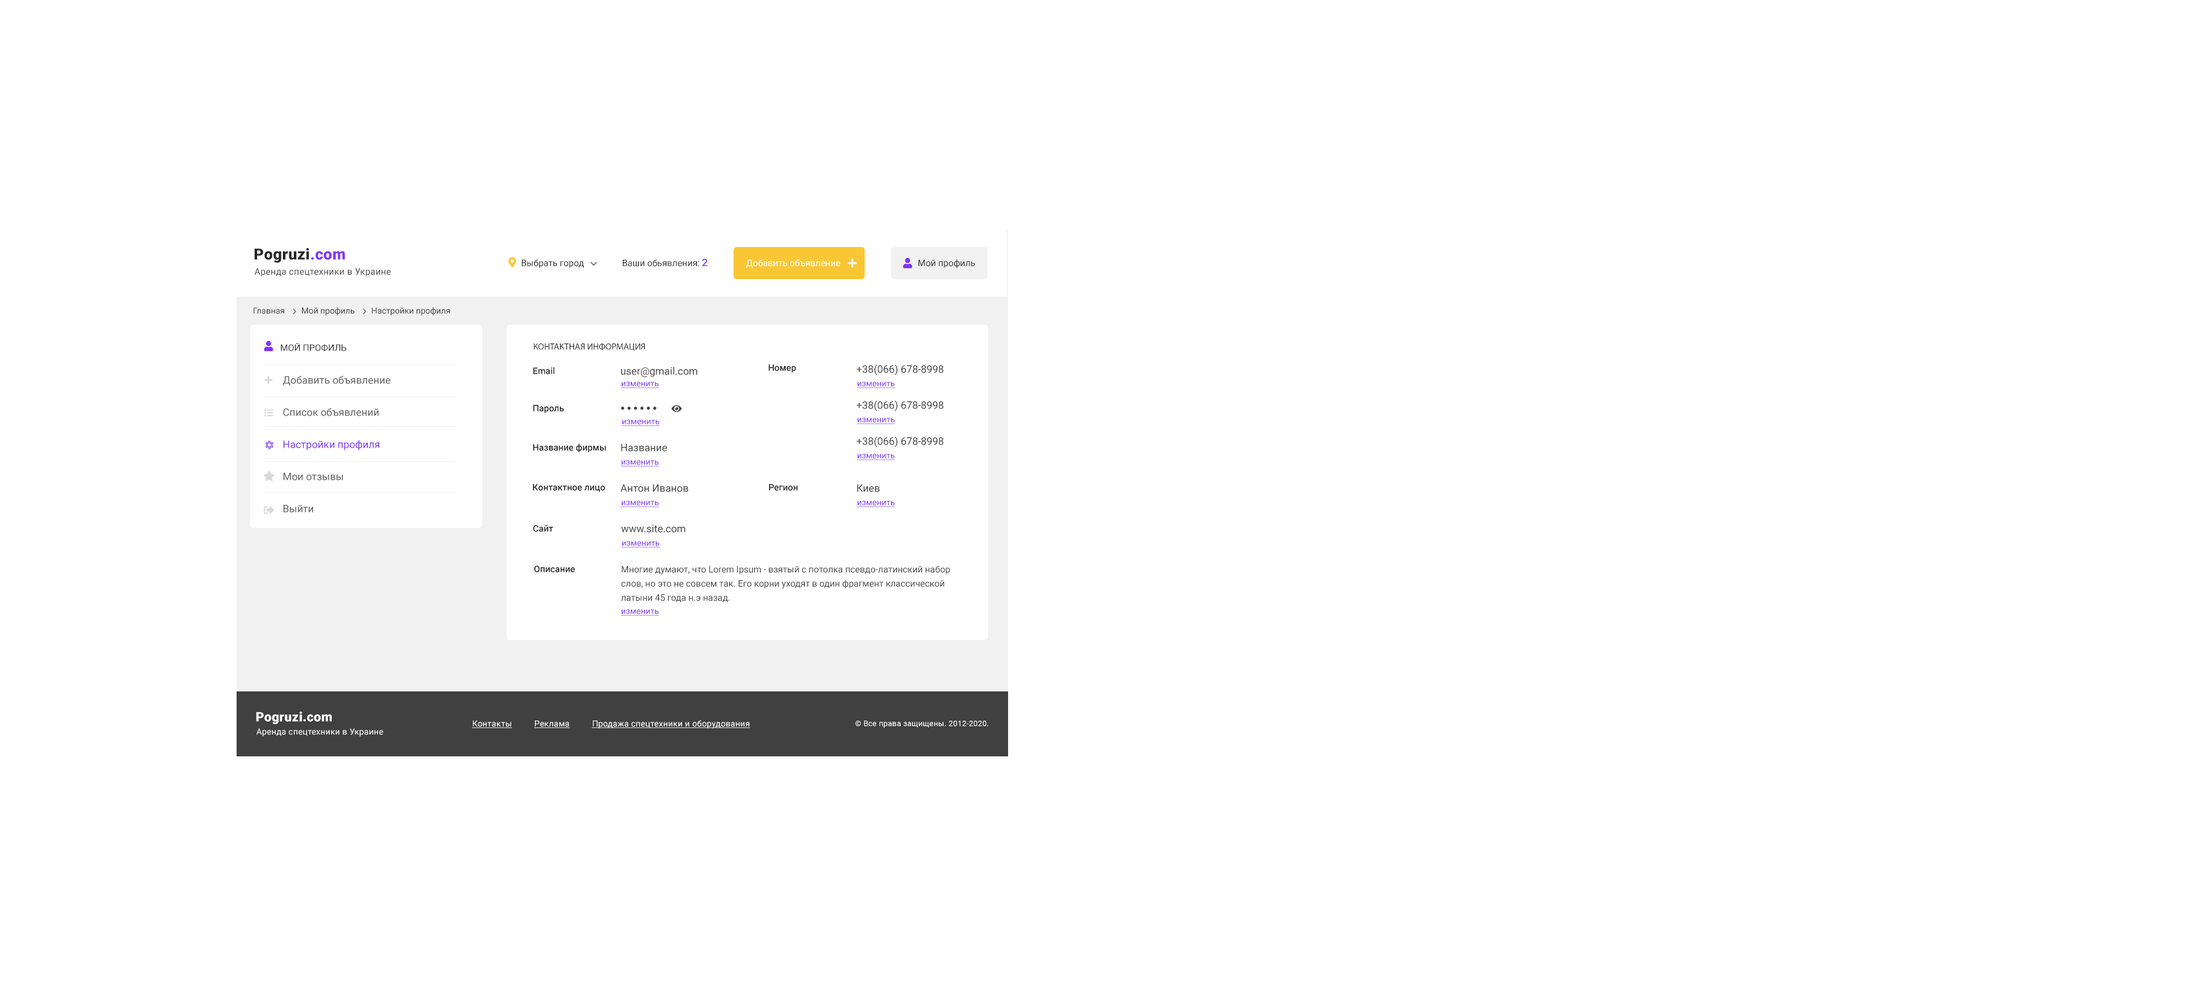
<style>
.page{position:relative;width:2191px;height:995px;background:#ffffff}
.page>*{position:absolute;margin:0}
.t1{font:15.4px "Roboto-Black";letter-spacing:0.02em;color:#292828}
.t2{font:15.4px "Roboto-Black";letter-spacing:0.02em;color:#8233f8}
.t3{font:9px "Roboto-Regular";letter-spacing:0.02em;color:#414040}
.t4{font:9px "Roboto-Regular";color:#2a2a29}
.t5{font:9px "Roboto-Regular";color:#2b2a2a}
.t6{font:10.3px "Roboto-Medium";color:#8233f8}
.t7{font:9px "Roboto-Regular";color:#ffffff}
.t8{font:8.4px "Roboto-Regular";color:#414040}
.t9{font:9px "Roboto-Regular";color:#292828;text-transform:uppercase}
.t10{font:9px "MyriadPro-Regular";color:#292828;text-transform:uppercase}
.t11{font:9px "Roboto-Medium";color:#292828}
.t12{font:10.3px "Roboto-Regular";color:#414040}
.t13{font:10.3px/32.1px "Roboto-Regular";color:#615f5f}
.t14{font:10.3px/32.1px "Roboto-Regular";color:#8233f8}
.t15{font:8.4px "Roboto-Regular";color:#8233f8;text-decoration:underline}
.t16{font:9px/14.1px "Roboto-Regular";color:#414040}
.t17{font:12.9px "Roboto-Black";letter-spacing:0.02em;color:#ffffff}
.t18{font:8.4px "Roboto-Regular";letter-spacing:0.02em;color:#ffffff;text-decoration:underline}
.t19{font:7.7px "Roboto-Regular";letter-spacing:0.02em;color:#ffffff}
.t20{font:8.4px "Roboto-Regular";letter-spacing:0.02em;color:#fdfafa}
</style>
<div class="page">
<p class="t1" style="left:255px;top:248px;width:90px;height:15px">Pogruzi<span class="t2">.com</span></p>
<p class="t3" style="left:255px;top:268px;width:136px;height:8px">Аренда спецтехники в Украине</p>
<p class="t4" style="left:521px;top:259px;width:63px;height:9px">Выбрать город</p>
<p class="t5" style="left:622px;top:258px;width:86px;height:8px">Ваши обьявления: <span class="t6">2</span></p>
<p class="t7" style="left:746px;top:259px;width:94px;height:9px">Добавить объявление</p>
<p class="t4" style="left:918px;top:259px;width:57px;height:9px">Мой профиль</p>
<p class="t8" style="left:253px;top:307px;width:197px;height:9px">Главная        Мой профиль        Настройки профиля</p>
<p class="t9" style="left:281px;top:343px;width:65px;height:8px">Мой профиль</p>
<p class="t10" style="left:534px;top:343px;width:111px;height:8px">Контактная информация</p>
<p class="t11" style="left:768px;top:364px;width:28px;height:9px">Номер</p>
<p class="t12" style="left:856px;top:364px;width:88px;height:11px">+38(066) 678-8998</p>
<p class="t13" style="left:283px;top:375px;width:108px;height:137px">Добавить объявление<br>Список объявлений<br><span class="t14">Настройки профиля<br></span>Мои отзывы<br>Выйти</p>
<p class="t11" style="left:533px;top:367px;width:22px;height:7px">Email</p>
<p class="t12" style="left:621px;top:366px;width:77px;height:11px">user@gmail.com</p>
<p class="t15" style="left:621px;top:381px;width:38px;height:7px">изменить</p>
<p class="t15" style="left:857px;top:381px;width:38px;height:7px">изменить</p>
<p class="t12" style="left:856px;top:400px;width:88px;height:11px">+38(066) 678-8998</p>
<p class="t11" style="left:533px;top:404px;width:31px;height:9px">Пароль</p>
<p class="t15" style="left:622px;top:419px;width:38px;height:7px">изменить</p>
<p class="t15" style="left:857px;top:417px;width:38px;height:7px">изменить</p>
<p class="t12" style="left:856px;top:436px;width:88px;height:11px">+38(066) 678-8998</p>
<p class="t11" style="left:533px;top:444px;width:73px;height:9px">Название фирмы</p>
<p class="t12" style="left:621px;top:444px;width:46px;height:7px">Название</p>
<p class="t15" style="left:621px;top:460px;width:38px;height:7px">изменить</p>
<p class="t15" style="left:857px;top:453px;width:38px;height:7px">изменить</p>
<p class="t11" style="left:533px;top:483px;width:72px;height:9px">Контактное лицо</p>
<p class="t12" style="left:620px;top:484px;width:68px;height:8px">Антон Иванов</p>
<p class="t11" style="left:769px;top:483px;width:29px;height:8px">Регион</p>
<p class="t12" style="left:857px;top:484px;width:23px;height:8px">Киев</p>
<p class="t15" style="left:621px;top:500px;width:38px;height:7px">изменить</p>
<p class="t15" style="left:857px;top:500px;width:38px;height:7px">изменить</p>
<p class="t11" style="left:533px;top:525px;width:21px;height:7px">Сайт</p>
<p class="t12" style="left:621px;top:524px;width:64px;height:8px">www.site.com</p>
<p class="t15" style="left:622px;top:541px;width:38px;height:7px">изменить</p>
<p class="t11" style="left:534px;top:565px;width:41px;height:7px">Описание</p>
<p class="t16" style="left:621px;top:565px;width:329px;height:37px">Многие думают, что Lorem Ipsum - взятый с потолка псевдо-латинский набор слов, но это не совсем так. Его корни уходят в один фрагмент классической латыни 45 года н.э назад.</p>
<p class="t15" style="left:621px;top:609px;width:38px;height:7px">изменить</p>
<p class="t17" style="left:256px;top:711px;width:76px;height:13px">Pogruzi.com</p>
<p class="t18" style="left:472px;top:719px;width:278px;height:9px">Контакты          Реклама          Продажа спецтехники и оборудования</p>
<p class="t19" style="left:855px;top:720px;width:133px;height:8px">© Все права защищены. 2012-2020.</p>
<p class="t20" style="left:256px;top:728px;width:127px;height:8px">Аренда спецтехники в Украине</p>
</div>
